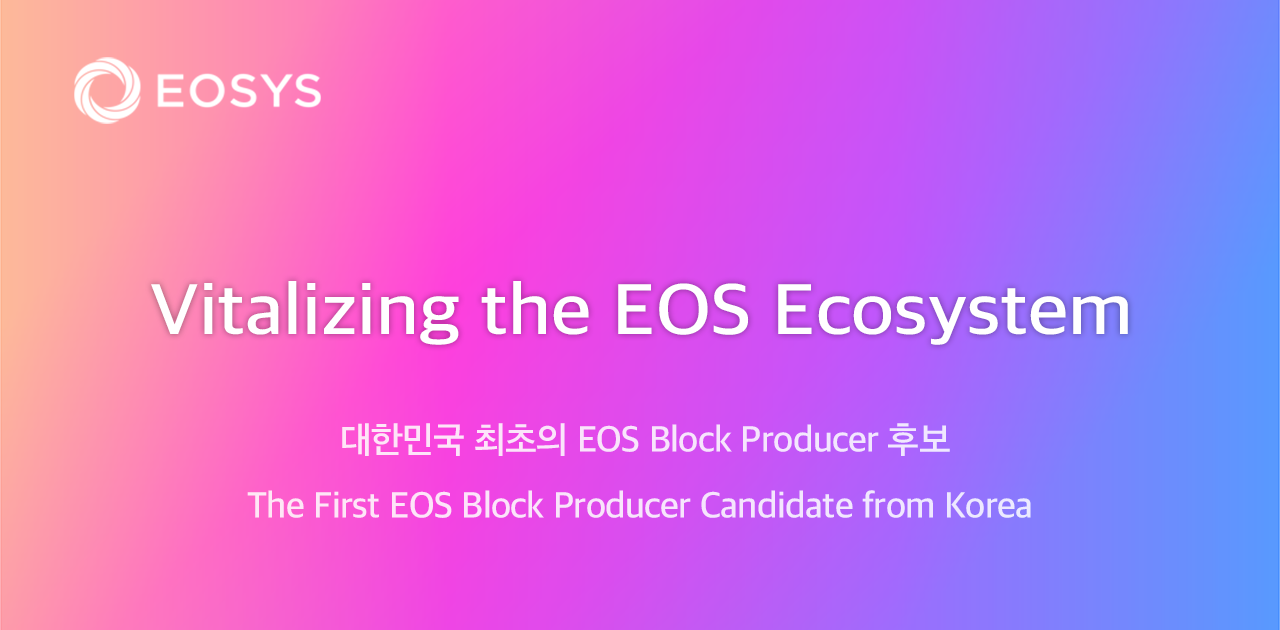
<style>
.page{position:relative;width:1280px;height:630px}
.page>*{position:absolute;margin:0}
.t1{font:72.5px "AppleSDGothicNeo-SemiBold";color:#ffffff;scale:1.09 1}
.t2{font:36.8px "AppleSDGothicNeo-SemiBold";letter-spacing:-0.016em;color:#f9e5fb}
.t3{font:36.8px "AppleSDGothicNeo-SemiBold";letter-spacing:-0.016em;color:#f8e5fc}
</style>
<div class="page">
<p class="t1" style="left:151px;top:281px;width:977px;height:64px">Vitalizing the EOS Ecosystem</p>
<p class="t2" style="left:342px;top:423px;width:608px;height:33px">대한민국 최초의 EOS Block Producer 후보</p>
<p class="t3" style="left:247px;top:490px;width:784px;height:28px">The First EOS Block Producer Candidate from Korea</p>
</div>
